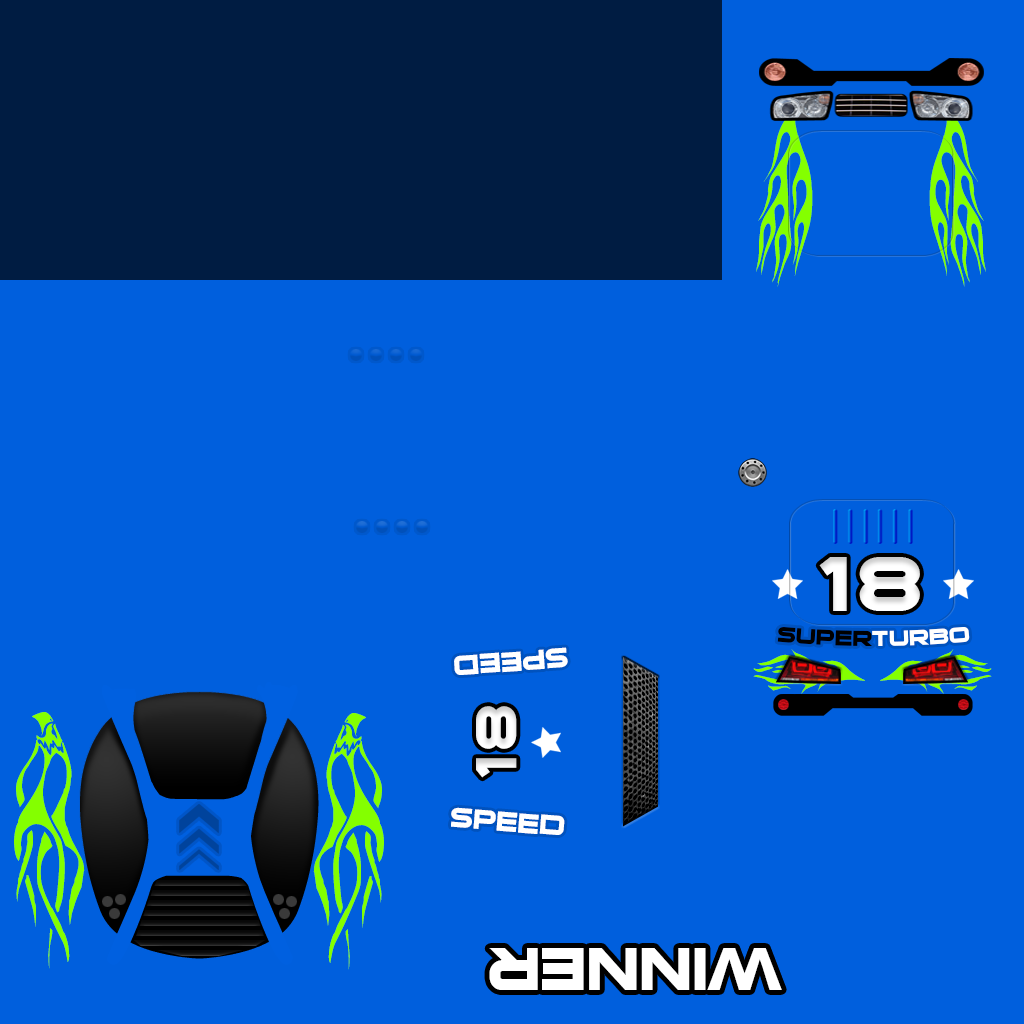
<style>
.page{position:relative;width:1024px;height:1024px;background:#005fdd}
.page>*{position:absolute;margin:0}
.t1{font:89.2px "VehicleDecals'Flames&Art'";color:#84ff00;font-variant:small-caps;scale:0.86 1}
.t2{font:70.1px "SuiGenerisBold";letter-spacing:0.1em;color:#ffffff;font-variant:small-caps}
.t3{font:30px "SuiGenerisBold";color:#000000;font-variant:small-caps}
.t4{font:30px "SuiGenerisBold";color:#ffffff;font-variant:small-caps}
.t5{font:36.8px "SuiGenerisBold";color:#ffffff;font-variant:small-caps}
.t6{font:72px "VehicleDecals'Flames&Art'";font-variant:small-caps;scale:0.49 1}
.t7{font:79.7px "VehicleDecals'Flames&Art'";color:#84ff00;font-variant:small-caps;scale:0.8 1}
.t8{font:53.2px "SuiGenerisBold";letter-spacing:0.1em;color:#ffffff;font-variant:small-caps;scale:0.93 1}
.t9{font:78.7px "SuiGenerisBold";color:#ffffff;font-variant:small-caps}
</style>
<div class="page">
<p class="t1" style="left:756px;top:101px;width:57px;height:186px;rotate:90deg">c</p>
<p class="t1" style="left:929px;top:101px;width:57px;height:186px;rotate:90deg">c</p>
<p class="t2" style="left:819px;top:557px;width:101px;height:54px">18</p>
<p class="t3" style="left:777px;top:627px;width:193px;height:19px">super<span class="t4">turbo</span></p>
<p class="t5" style="left:454px;top:647px;width:114px;height:28px;rotate:176deg">speed</p>
<p class="t6" style="left:753px;top:649px;width:112px;height:45px;rotate:180deg">s</p>
<p class="t6" style="left:880px;top:649px;width:112px;height:45px">s</p>
<p class="t7" style="left:14px;top:712px;width:71px;height:257px;rotate:90deg">4</p>
<p class="t7" style="left:313px;top:713px;width:71px;height:257px;rotate:90deg">4</p>
<p class="t8" style="left:476px;top:706px;width:41px;height:72px;rotate:-90deg">18</p>
<p class="t5" style="left:451px;top:807px;width:114px;height:28px;rotate:5deg">speed</p>
<p class="t9" style="left:489px;top:948px;width:293px;height:42px;rotate:180deg">winner</p>
</div>
